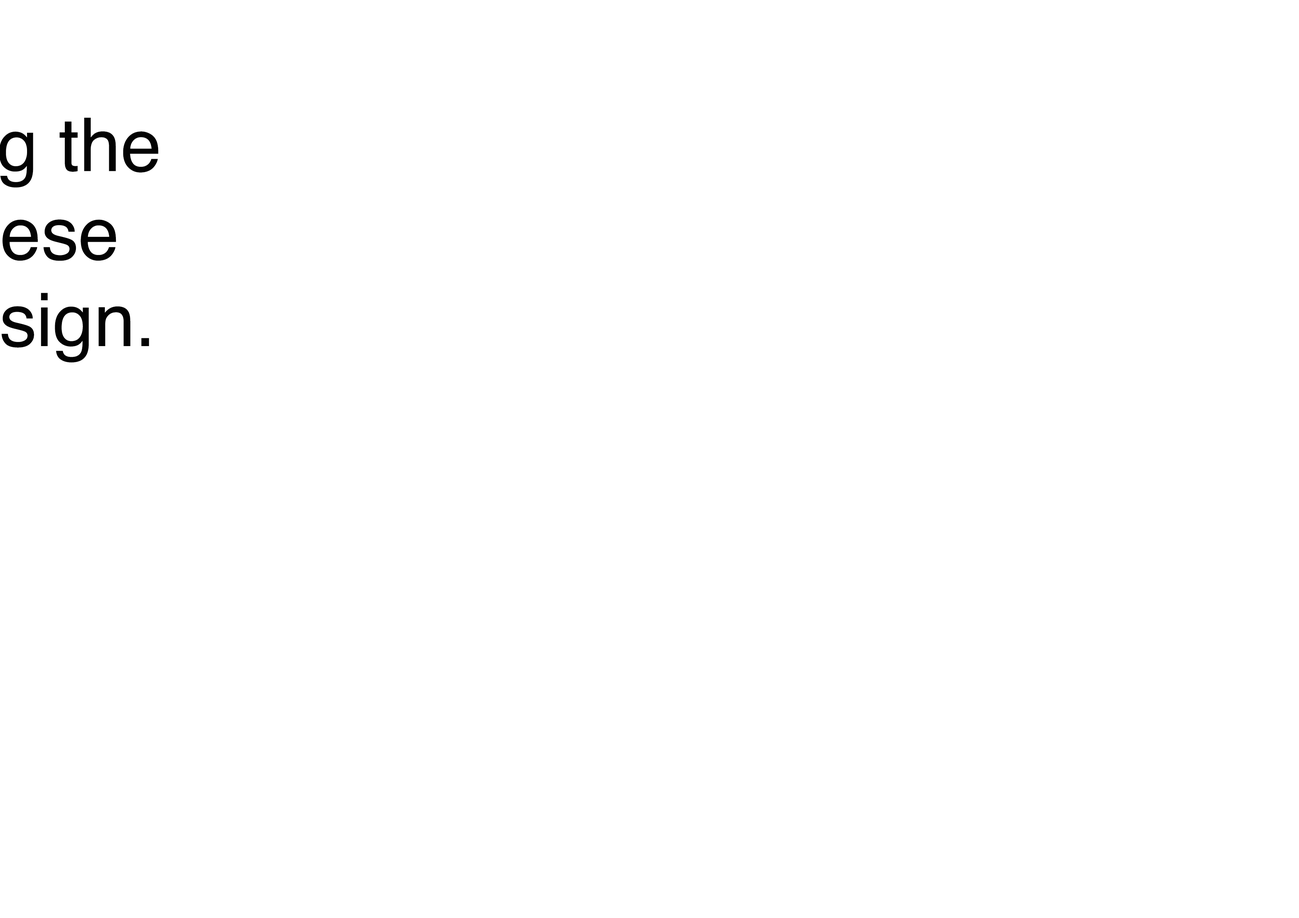
<style>
.page{position:relative;width:1299px;height:918px;background:#ffffff}
.page>*{position:absolute;margin:0}
.t1{font:74px "Helvetica";color:#030303}
</style>
<div class="page">
<p class="t1" style="left:2px;top:220px;width:114px;height:41px">ese</p>
<p class="t1" style="left:1px;top:293px;width:148px;height:70px">sign.</p>
</div>
